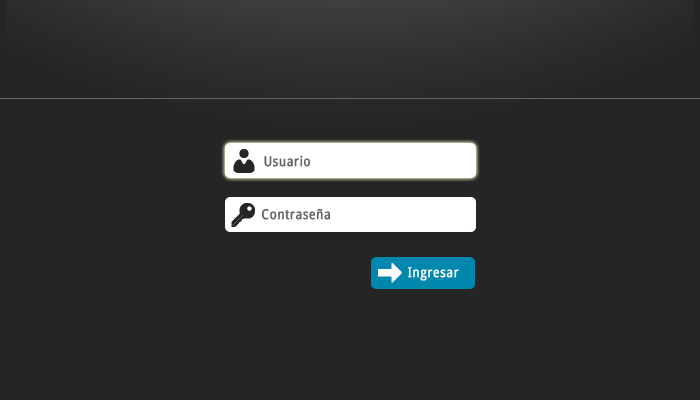
<style>
.page{position:relative;width:700px;height:400px;background:#252525}
.page>*{position:absolute;margin:0}
.t1{font:13.8px "DroidSans";letter-spacing:0.04em;color:#656565;font-weight:bold;scale:0.87 1}
.t2{font:13.8px "DroidSans";letter-spacing:0.04em;color:#fefefe;font-weight:bold;scale:0.87 1}
</style>
<div class="page">
<p class="t1" style="left:264px;top:155px;width:47px;height:12px">Usuario</p>
<p class="t1" style="left:261px;top:208px;width:70px;height:12px">Contraseña</p>
<p class="t2" style="left:408px;top:267px;width:51px;height:14px">Ingresar</p>
</div>
